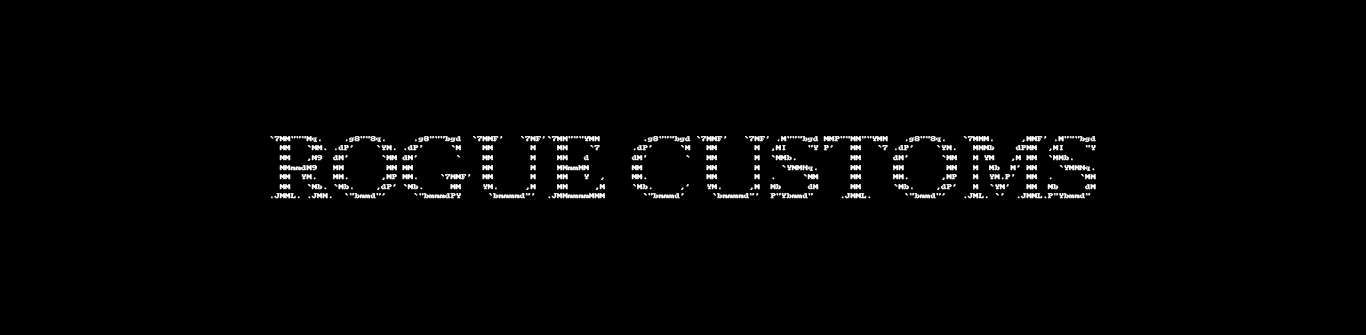
<style>
.page{position:relative;width:1366px;height:335px;background:#000000}
.page>*{position:absolute;margin:0}
.t1{font:8px "PxPlus_Tandy1K-II_225L";color:#ffffff}
</style>
<div class="page">
<p class="t1" style="left:270px;top:136px;width:826px;height:63px">`7MM"""Mq.    .g8""8q.     .g8"""bgd  `7MMF'   `7MF'`7MM"""YMM        .g8"""bgd `7MMF'   `7MF' .M"""bgd MMP""MM""YMM   .g8""8q.   `7MMM.     ,MMF' .M"""bgd <br>  MM   `MM. .dP'    `YM. .dP'     `M    MM       M    MM    `7      .dP'     `M   MM       M  ,MI    "Y P'   MM   `7 .dP'    `YM.   MMMb    dPMM  ,MI    "Y <br>  MM   ,M9  dM'      `MM dM'       `    MM       M    MM   d        dM'       `   MM       M  `MMb.          MM      dM'      `MM   M YM   ,M MM  `MMb.     <br>  MMmmdM9   MM        MM MM             MM       M    MMmmMM        MM            MM       M    `YMMNq.      MM      MM        MM   M  Mb  M' MM    `YMMNq. <br>  MM  YM.   MM.      ,MP MM.    `7MMF'  MM       M    MM   Y  ,     MM.           MM       M  .     `MM      MM      MM.      ,MP   M  YM.P'  MM  .     `MM <br>  MM   `Mb. `Mb.    ,dP' `Mb.     MM    YM.     ,M    MM     ,M     `Mb.     ,'   YM.     ,M  Mb     dM      MM      `Mb.    ,dP'   M  `YM'   MM  Mb     dM <br>.JMML. .JMM.  `"bmmd"'     `"bmmmdPY     `bmmmmd"'  .JMMmmmmMMM       `"bmmmd'     `bmmmmd"'  P"Ybmmd"     .JMML.      `"bmmd"'   .JML. `'  .JMML.P"Ybmmd"</p>
</div>
